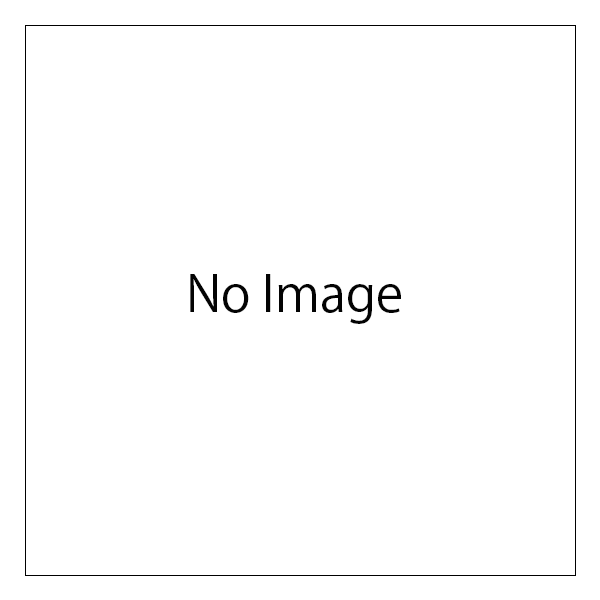
<style>
.page{position:relative;width:600px;height:600px;background:#ffffff}
.page>*{position:absolute;margin:0}
.t1{font:12px "KozGoPr6N-Regular";color:#030303}
</style>
<div class="page">
<p class="t1" style="left:190px;top:274px;width:211px;height:50px">No Image</p>
</div>
